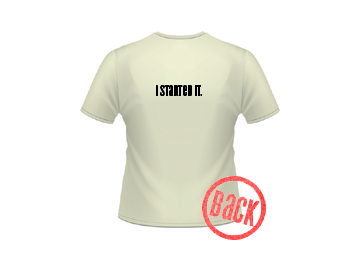
<style>
.page{position:relative;width:360px;height:260px;background:#ffffff}
.page>*{position:absolute;margin:0}
.t1{font:16.2px "CycloneLayers-Background";color:#000000}
</style>
<div class="page">
<p class="t1" style="left:156px;top:85px;width:46px;height:11px">I started it.</p>
</div>
